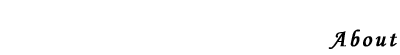
<style>
.page{position:relative;width:400px;height:55px;background:#ffffff}
.page>*{position:absolute;margin:0}
.t1{font:24px "MonotypeCorsiva";letter-spacing:0.1em;color:#000000;font-weight:bold}
</style>
<div class="page">
<p class="t1" style="left:328px;top:29px;width:69px;height:20px">About</p>
</div>
